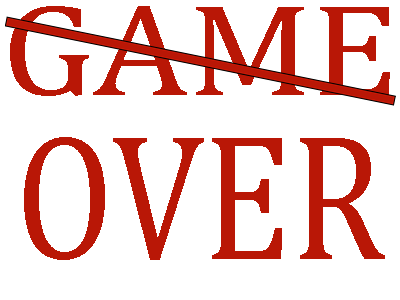
<style>
.page{position:relative;width:400px;height:300px;background:#ffffff}
.page>*{position:absolute;margin:0}
.t1{font:132.5px/141px "CambriaMath";color:#b91706;scale:1.15 1}
.t2{font:182.2px/149px "CambriaMath";color:#b91706;scale:0.83 1}
</style>
<div class="page">
<p class="t1" style="left:10px;top:6px;width:380px;height:254px;text-align:center">GAME<br><span class="t2">OVER</span></p>
</div>
